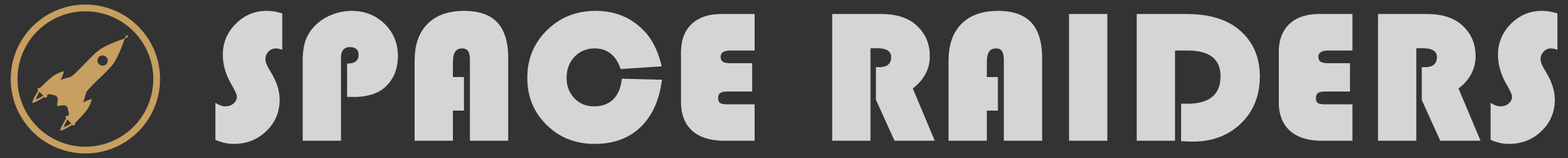
<style>
.page{position:relative;width:1568px;height:158px;background:#333333}
.page>*{position:absolute;margin:0}
.t1{font:190.5px "Bauhaus93";letter-spacing:0.02em;color:#d5d5d5;text-transform:uppercase}
</style>
<div class="page">
<p class="t1" style="left:215px;top:11px;width:1342px;height:134px">Space Raiders</p>
</div>
